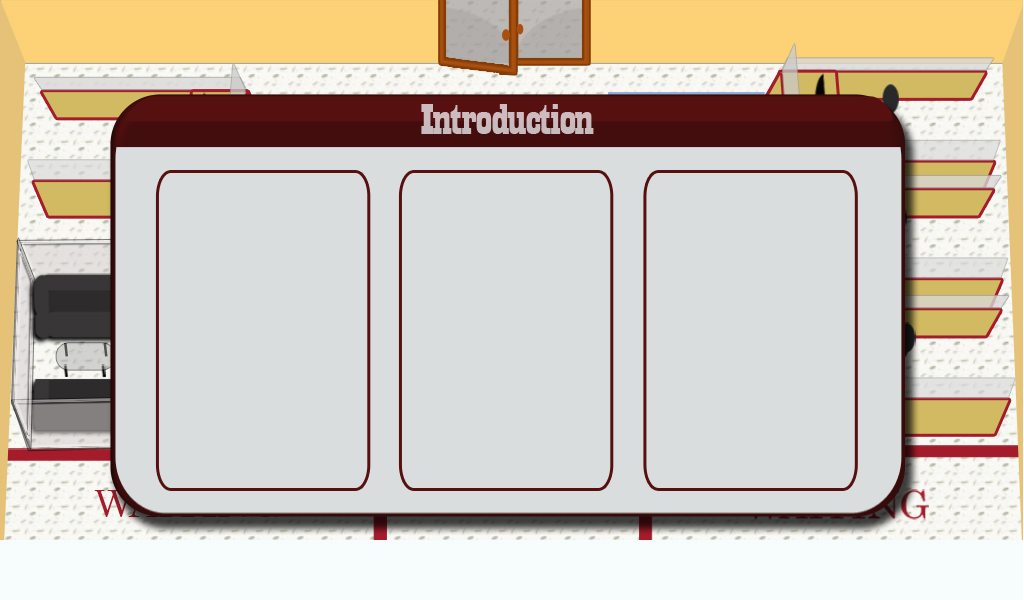
<style>
.page{position:relative;width:1024px;height:600px;background:#daddde}
.page>*{position:absolute;margin:0}
.t1{font:44.6px "Playbill";letter-spacing:-0.025em;color:#c8bbbe;scale:1.61 1}
</style>
<div class="page">
<p class="t1" style="left:421px;top:104px;width:173px;height:30px">Introduction</p>
</div>
